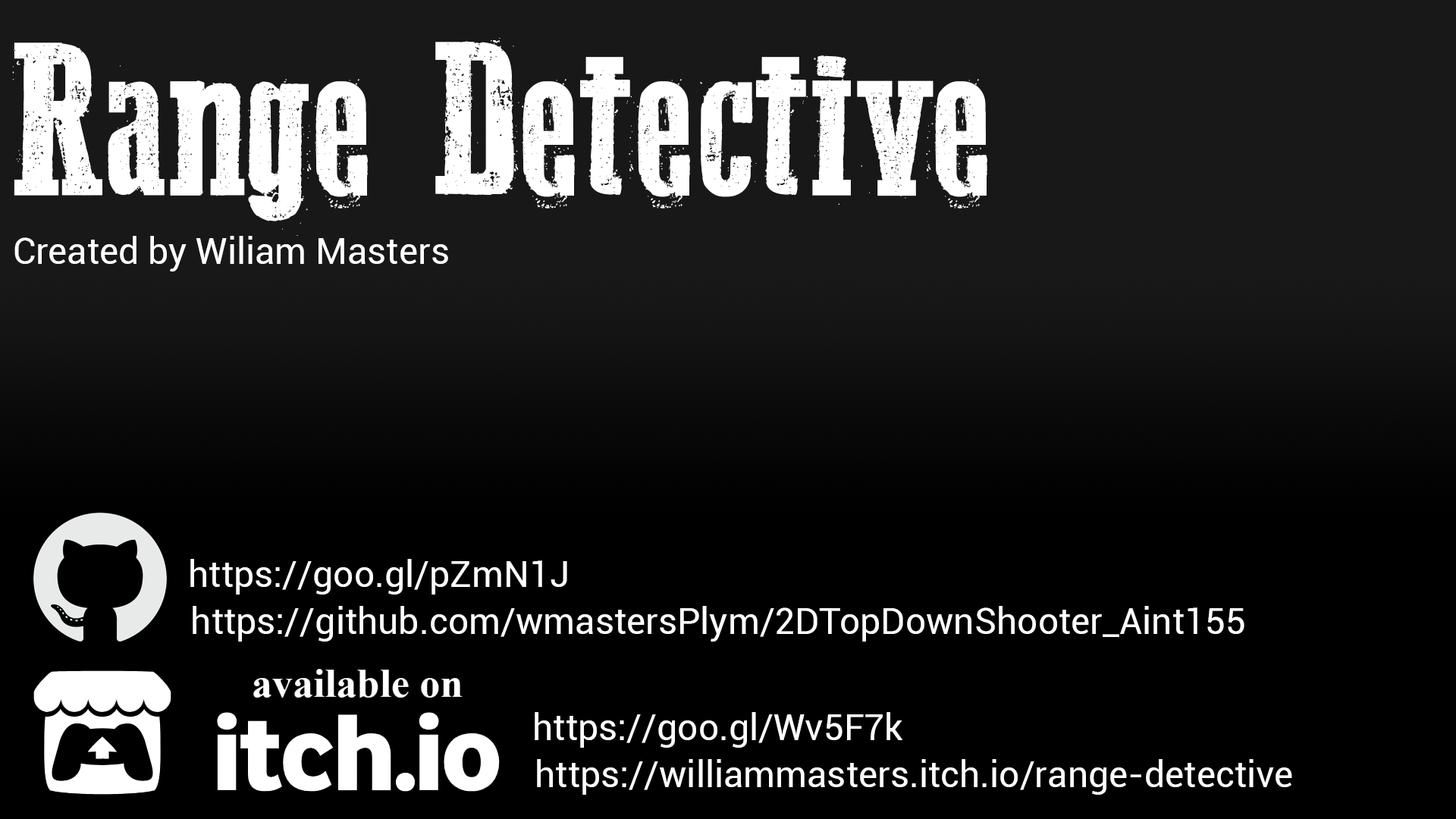
<style>
.page{position:relative;width:1456px;height:819px;background:#000000}
.page>*{position:absolute;margin:0}
.t1{font:227.5px "WesternBangBang";color:#ffffff}
.t2{font:36.4px "Roboto-Regular";color:#ffffff}
</style>
<div class="page">
<p class="t1" style="left:12px;top:38px;width:975px;height:198px">Range Detective</p>
<p class="t2" style="left:14px;top:236px;width:434px;height:35px">Created by Wiliam Masters</p>
<p class="t2" style="left:190px;top:559px;width:377px;height:36px">https://goo.gl/pZmN1J</p>
<p class="t2" style="left:193px;top:606px;width:1051px;height:36px">https://github.com/wmastersPlym/2DTopDownShooter_Aint155</p>
<p class="t2" style="left:535px;top:712px;width:368px;height:36px">https://goo.gl/Wv5F7k</p>
<p class="t2" style="left:537px;top:759px;width:755px;height:36px">https://williammasters.itch.io/range-detective</p>
</div>
